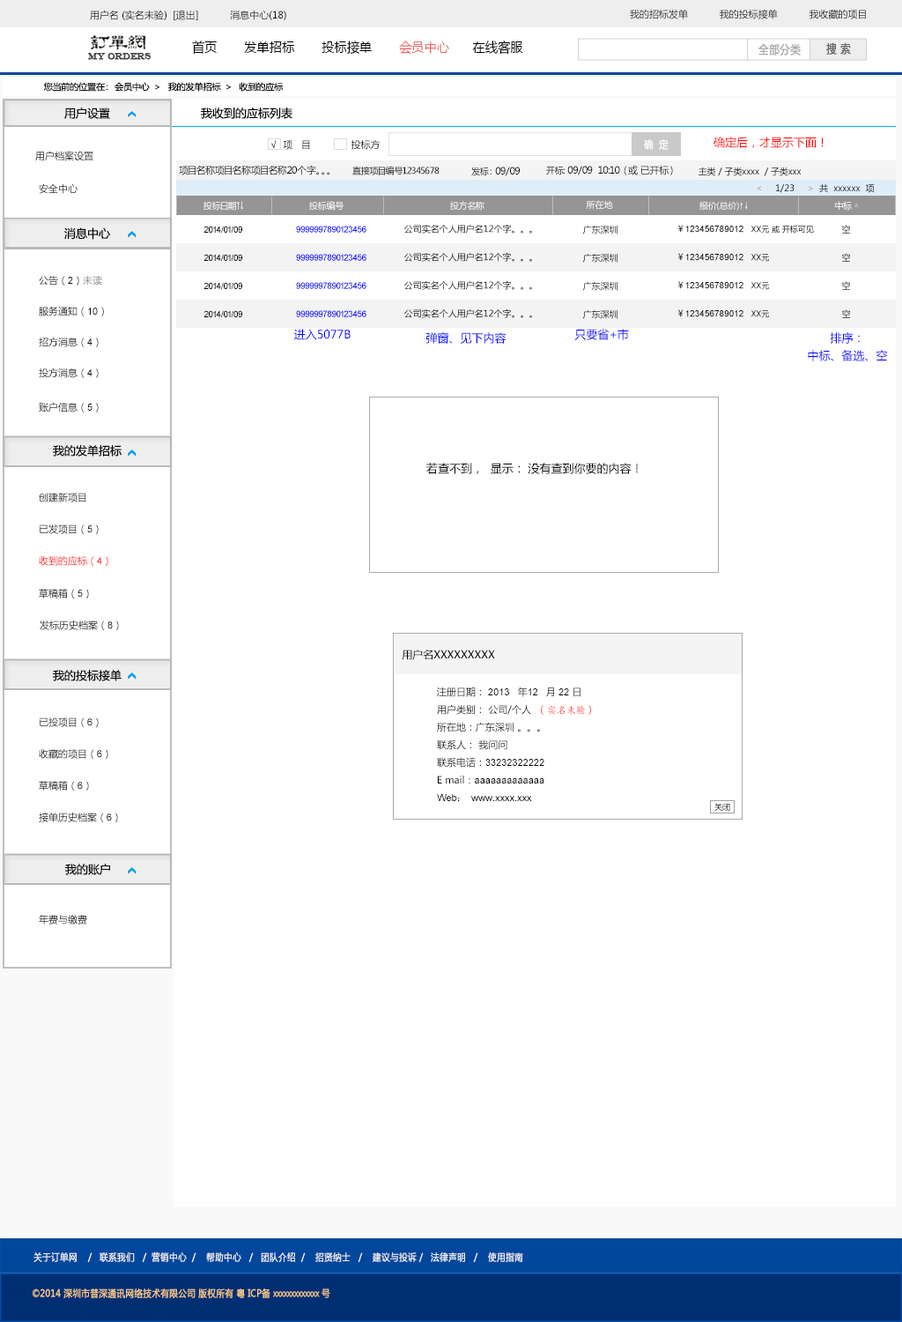
<style>
.page{position:relative;width:902px;height:1322px;background:#ffffff}
.page>*{position:absolute;margin:0}
.t1{font:9.7px "MicrosoftYaHei";color:#000000}
.t2{font:13.6px "MicrosoftYaHei";color:#000000;font-variant:small-caps;scale:0.94 1}
.t3{font:13.6px "MicrosoftYaHei";color:#ed6059;font-variant:small-caps;scale:0.94 1}
.t4{font:8.7px "EngraversMT";color:#434343;font-variant:small-caps;font-weight:bold;scale:0.86 1}
.t5{font:11.6px "MicrosoftYaHei";color:#aaaaaa;font-variant:small-caps;font-weight:bold;scale:0.86 1}
.t6{font:11.6px "MicrosoftYaHei";color:#626262;font-variant:small-caps;font-weight:bold;scale:0.86 1}
.t7{font:8.8px "MicrosoftYaHei";color:#060606}
.t8{font:11.5px "MicrosoftYaHei";color:#060606}
.t9{font:11.5px "MicrosoftYaHei";color:#ff0000}
.t10{font:10.7px "MicrosoftYaHei";color:#ffffff;font-variant:small-caps;font-weight:bold;scale:0.86 1}
.t11{font:9.7px "MicrosoftYaHei";color:#060606}
.t12{font:8.8px "MicrosoftYaHei";color:#000000}
.t13{font:9.7px "MicrosoftYaHei"}
.t14{font:8.8px "MicrosoftYaHei";color:#ffffff}
.t15{font:8.8px "SimSun";color:#ffffff}
.t16{font:8.8px "ArialMT";color:#020202}
.t17{font:8.8px "ArialMT";color:#0000ff}
.t18{font:8.8px "MicrosoftYaHei"}
.t19{font:8.8px "ArialMT";color:#000000}
.t20{font:7.9px "MicrosoftYaHei";color:#000000}
.t21{font:9.7px "ArialMT";color:#060606}
.t22{font:9.7px "MicrosoftYaHei";color:#888584}
.t23{font:11.5px "MicrosoftYaHei";color:#0000ff}
.t24{font:11.5px/17.6px "MicrosoftYaHei";color:#0000ff}
.t25{font:11.5px "MicrosoftYaHei";color:#000000}
.t26{font:9.7px "ArialMT";color:#000000}
.t27{font:9.7px "MicrosoftYaHei";color:#ff0000}
.t28{font:9.7px "ArialMT";color:#ff0000}
.t29{font:10.6px "MicrosoftYaHei";color:#000000}
.t30{font:12.3px "MicrosoftYaHei";color:#000000}
.t31{font:9.7px/17.6px "MicrosoftYaHei";color:#000000}
.t32{font:9.7px/17.6px "ArialMT";color:#000000}
.t33{font:9.7px/17.6px "STKaiti";color:#000000}
.t34{font:9.7px/17.6px "SimSun";color:#000000}
.t35{font:7.9px "MicrosoftYaHei"}
.t36{font:9.7px "MicrosoftYaHei";color:#eeeeee;font-variant:small-caps;font-weight:bold;scale:0.86 1}
.t37{font:13.6px "STXihei";color:#eeeeee;font-variant:small-caps;font-weight:bold;scale:0.86 1}
.t38{font:9.7px "MicrosoftYaHei";color:#facd89;font-variant:small-caps;font-weight:bold;scale:0.87 1}
.t39{font:9.7px "MicrosoftYaHei";color:#eeeeee;font-variant:small-caps;font-weight:bold;scale:0.87 1}
</style>
<div class="page">
<p class="t1" style="left:90px;top:10px;width:196px;height:10px">用户名 (实名未验)  [退出]           消息中心(18)</p>
<p class="t1" style="left:630px;top:9px;width:236px;height:10px">我的招标发单           我的投标接单           我收藏的项目</p>
<p class="t2" style="left:192px;top:41px;width:331px;height:14px">首页       发单招标       投标接单       <span class="t3">会员中心</span>      在线客服</p>
<p class="t4" style="left:88px;top:53px;width:64px;height:7px">MY ORDERS</p>
<p class="t5" style="left:759px;top:43px;width:42px;height:13px">全部分类</p>
<p class="t6" style="left:826px;top:42px;width:25px;height:13px">搜 索</p>
<p class="t7" style="left:43px;top:82px;width:241px;height:10px">您当前的位置在：  会员中心  &gt;   我的发单招标  &gt;   收到的应标</p>
<p class="t8" style="left:64px;top:107px;width:46px;height:12px">用户设置</p>
<p class="t8" style="left:201px;top:107px;width:92px;height:12px">我收到的应标列表</p>
<p class="t9" style="left:714px;top:137px;width:110px;height:11px">确定后，才显示下面！</p>
<p class="t1" style="left:270px;top:139px;width:111px;height:11px">√  项   目              投标方</p>
<p class="t10" style="left:644px;top:139px;width:25px;height:11px">确  定</p>
<p class="t11" style="left:35px;top:151px;width:58px;height:10px">用户档案设置</p>
<p class="t1" style="left:179px;top:165px;width:151px;height:10px">项目名称项目名称项目名称20个字。。。</p>
<p class="t12" style="left:352px;top:166px;width:88px;height:9px">直接项目编号12345678</p>
<p class="t1" style="left:471px;top:167px;width:49px;height:9px"><span class="t12">发标： </span>09/09</p>
<p class="t1" style="left:546px;top:165px;width:127px;height:10px"><span class="t12">开标:</span> 09/09  10:10 （或 已开标）</p>
<p class="t12" style="left:699px;top:167px;width:103px;height:9px">主类 / 子类xxxx  / 子类xxx</p>
<p class="t13" style="left:39px;top:183px;width:39px;height:11px">安全中心</p>
<p class="t7" style="left:757px;top:184px;width:118px;height:9px">&lt;     1/23     &gt;  共  xxxxxx  项</p>
<p class="t14" style="left:204px;top:201px;width:40px;height:10px">投标日期↑↓</p>
<p class="t14" style="left:309px;top:201px;width:36px;height:10px">投标编号</p>
<p class="t14" style="left:450px;top:201px;width:35px;height:10px">投方名称</p>
<p class="t14" style="left:586px;top:200px;width:27px;height:10px">所在地</p>
<p class="t14" style="left:700px;top:201px;width:48px;height:10px">报价(总价)<span class="t15">↑↓</span></p>
<p class="t14" style="left:835px;top:201px;width:24px;height:10px">中标 △</p>
<p class="t8" style="left:64px;top:227px;width:46px;height:13px">消息中心</p>
<p class="t16" style="left:204px;top:226px;width:38px;height:7px">2014/01/09</p>
<p class="t17" style="left:296px;top:226px;width:71px;height:7px">9999997890123456</p>
<p class="t12" style="left:404px;top:224px;width:128px;height:9px">公司实名个人用户名12个字。。。</p>
<p class="t18" style="left:582px;top:226px;width:36px;height:8px">广东深圳</p>
<p class="t19" style="left:678px;top:225px;width:136px;height:8px"><span class="t12">￥</span>123456789012   <span class="t20">XX元 或 开标可见</span></p>
<p class="t18" style="left:841px;top:225px;width:10px;height:8px">空</p>
<p class="t16" style="left:204px;top:254px;width:38px;height:7px">2014/01/09</p>
<p class="t17" style="left:296px;top:254px;width:71px;height:7px">9999997890123456</p>
<p class="t12" style="left:404px;top:252px;width:128px;height:10px">公司实名个人用户名12个字。。。</p>
<p class="t18" style="left:582px;top:254px;width:36px;height:9px">广东深圳</p>
<p class="t19" style="left:678px;top:253px;width:91px;height:9px"><span class="t12">￥</span>123456789012   <span class="t20">XX元</span></p>
<p class="t18" style="left:841px;top:253px;width:10px;height:9px">空</p>
<p class="t11" style="left:39px;top:275px;width:63px;height:10px">公告（<span class="t21">2</span>）<span class="t22">未读</span></p>
<p class="t16" style="left:204px;top:282px;width:38px;height:7px">2014/01/09</p>
<p class="t17" style="left:296px;top:282px;width:71px;height:7px">9999997890123456</p>
<p class="t12" style="left:404px;top:280px;width:128px;height:10px">公司实名个人用户名12个字。。。</p>
<p class="t18" style="left:582px;top:282px;width:36px;height:9px">广东深圳</p>
<p class="t19" style="left:678px;top:281px;width:91px;height:9px"><span class="t12">￥</span>123456789012   <span class="t20">XX元</span></p>
<p class="t18" style="left:841px;top:281px;width:10px;height:9px">空</p>
<p class="t11" style="left:39px;top:306px;width:65px;height:10px">服务通知（<span class="t21">10</span>）</p>
<p class="t16" style="left:204px;top:310px;width:38px;height:7px">2014/01/09</p>
<p class="t17" style="left:296px;top:310px;width:71px;height:7px">9999997890123456</p>
<p class="t12" style="left:404px;top:308px;width:128px;height:10px">公司实名个人用户名12个字。。。</p>
<p class="t18" style="left:582px;top:310px;width:36px;height:9px">广东深圳</p>
<p class="t19" style="left:678px;top:309px;width:91px;height:9px"><span class="t12">￥</span>123456789012   <span class="t20">XX元</span></p>
<p class="t18" style="left:841px;top:309px;width:10px;height:9px">空</p>
<p class="t23" style="left:293px;top:329px;width:58px;height:11px">进入5077B</p>
<p class="t23" style="left:574px;top:329px;width:55px;height:11px">只要省+市</p>
<p class="t11" style="left:39px;top:337px;width:60px;height:10px">招方消息（<span class="t21">4</span>）</p>
<p class="t23" style="left:426px;top:332px;width:81px;height:12px">弹窗、见下内容</p>
<p class="t24" style="left:808px;top:332px;width:80px;height:29px;text-align:center">排序：<br>中标、备选、空</p>
<p class="t11" style="left:39px;top:367px;width:60px;height:11px">投方消息（<span class="t21">4</span>）</p>
<p class="t11" style="left:39px;top:402px;width:60px;height:10px">账户信息（<span class="t21">5</span>）</p>
<p class="t8" style="left:53px;top:445px;width:69px;height:11px">我的发单招标</p>
<p class="t25" style="left:426px;top:463px;width:212px;height:11px">若查不到，  显示： 没有查到你要的内容！</p>
<p class="t13" style="left:39px;top:493px;width:47px;height:9px">创建新项目</p>
<p class="t1" style="left:39px;top:524px;width:60px;height:10px">已发项目（<span class="t26">5</span>）</p>
<p class="t27" style="left:39px;top:556px;width:69px;height:10px">收到的应标（<span class="t28">4</span>）</p>
<p class="t11" style="left:39px;top:589px;width:50px;height:9px">草稿箱（<span class="t21">5</span>）</p>
<p class="t11" style="left:40px;top:620px;width:79px;height:10px">发标历史档案（<span class="t21">8</span>）</p>
<p class="t29" style="left:402px;top:649px;width:93px;height:11px"><span class="t30"> </span>用户名XXXXXXXXX</p>
<p class="t8" style="left:53px;top:670px;width:69px;height:11px">我的投标接单</p>
<p class="t31" style="left:437px;top:686px;width:154px;height:116px">注册日期：<span class="t32"> 2013   </span>年<span class="t32">12   </span>月<span class="t32"> 22 </span>日   <br>用户类别： 公司/个人  （<span class="t33">实名未验</span>）   <br>所在地：广东深圳 。。。<br>联系人： 我问问<br>联系电话：<span class="t32">33232322222<br></span>E mail：<span class="t32">aaaaaaaaaaaaa<br>Web</span><span class="t34">： </span><span class="t32">www.xxxx.xxx</span></p>
<p class="t11" style="left:39px;top:717px;width:60px;height:10px">已投项目（<span class="t21">6</span>）</p>
<p class="t11" style="left:39px;top:749px;width:69px;height:10px">收藏的项目（<span class="t21">6</span>）</p>
<p class="t11" style="left:39px;top:781px;width:50px;height:9px">草稿箱（<span class="t21">6</span>）</p>
<p class="t35" style="left:715px;top:803px;width:15px;height:8px">关闭</p>
<p class="t11" style="left:39px;top:812px;width:79px;height:10px">接单历史档案（<span class="t21">6</span>）</p>
<p class="t8" style="left:65px;top:863px;width:45px;height:12px">我的账户</p>
<p class="t11" style="left:39px;top:915px;width:48px;height:9px">年费与缴费</p>
<p class="t36" style="left:33px;top:1251px;width:490px;height:11px"><span class="t37"><br><br></span>关于订单网    /   联系我们   /  营销中心  /    帮助中心   /   团队介绍  /    招贤纳士   /    建议与投诉 /   法律声明   /    使用指南</p>
<p class="t38" style="left:33px;top:1288px;width:297px;height:10px"><span class="t39"> </span>©2014 深圳市普深通讯网络技术有限公司 版权所有 粤 ICP备 xxxxxxxxxxxxx 号</p>
</div>
